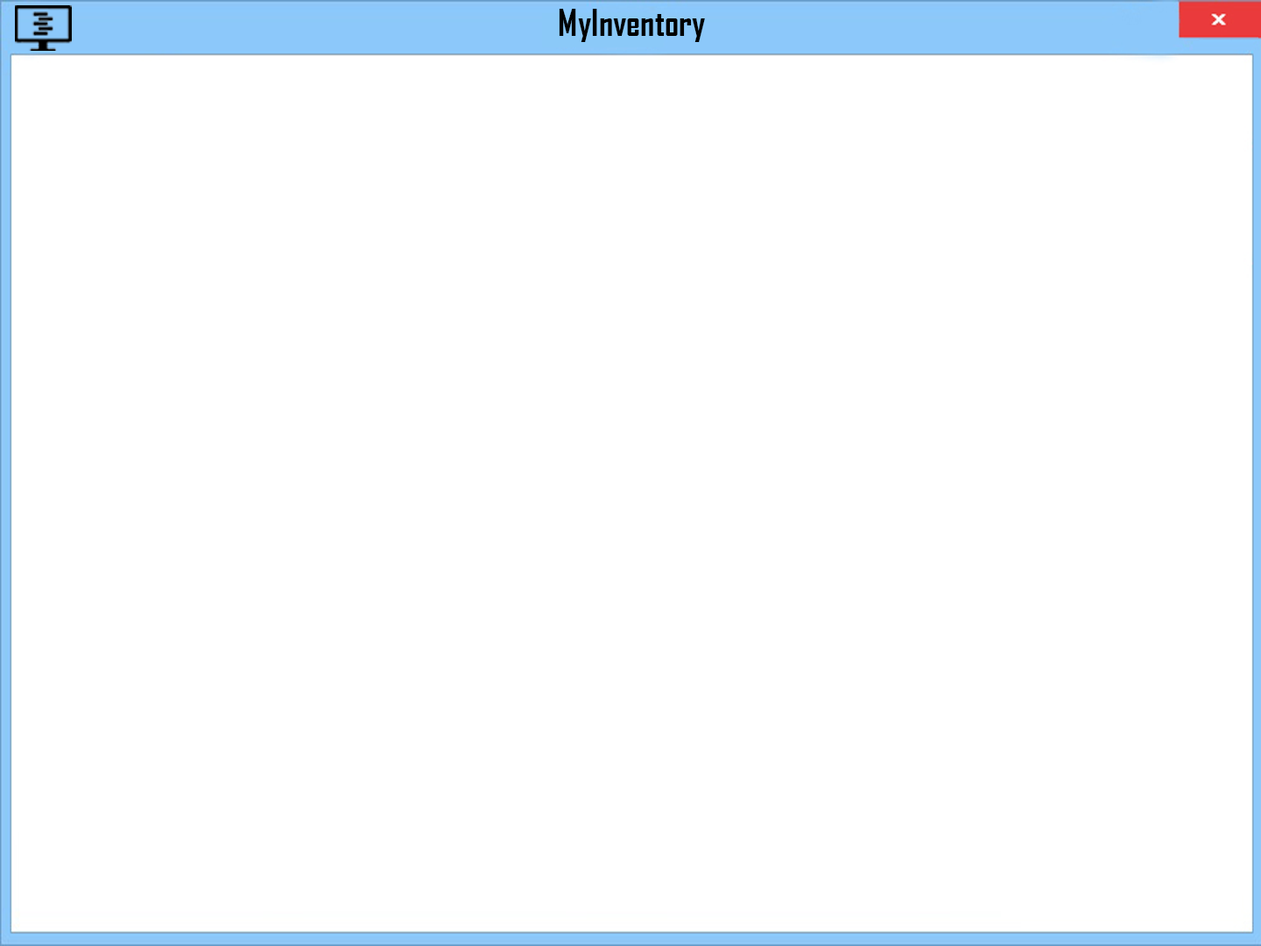
<style>
.page{position:relative;width:1261px;height:946px;background:#ffffff}
.page>*{position:absolute;margin:0}
.t1{font:35px "AgencyFB-Bold";color:#000000}
</style>
<div class="page">
<p class="t1" style="left:559px;top:9px;width:146px;height:33px">MyInventory</p>
</div>
